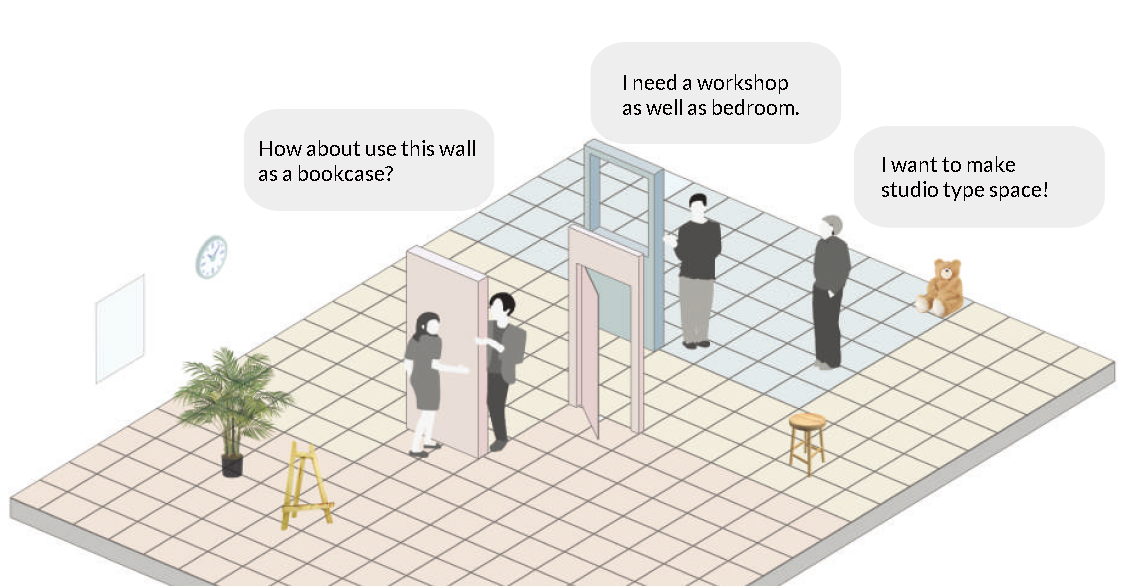
<style>
.page{position:relative;width:1142px;height:586px;background:#ffffff}
.page>*{position:absolute;margin:0}
.t1{font:21.3px "Lato-Regular";color:#040000}
</style>
<div class="page">
<p class="t1" style="left:623px;top:74px;width:176px;height:41px">I need a workshop <br>as well as bedroom.</p>
<p class="t1" style="left:259px;top:140px;width:216px;height:41px">How about use this wall<br>as a bookcase?</p>
<p class="t1" style="left:882px;top:156px;width:165px;height:45px">I want to make<br>studio type space!</p>
</div>
